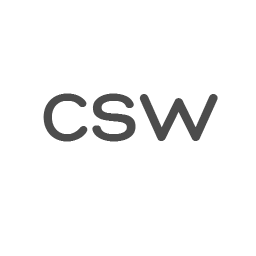
<style>
.page{position:relative;width:256px;height:256px;background:#ffffff}
.page>*{position:absolute;margin:0}
.t1{font:72px "Hero-Bold";color:#4c4c4c}
</style>
<div class="page">
<p class="t1" style="left:43px;top:93px;width:175px;height:49px">CSW</p>
</div>
